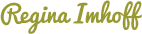
<style>
.page{position:relative;width:142px;height:34px;background:#ffffff}
.page>*{position:absolute;margin:0}
.t1{font:24px "Pacifico-Regular";color:#999933}
</style>
<div class="page">
<p class="t1" style="left:0px;top:0px;width:142px;height:34px">Regina Imhoff</p>
</div>
